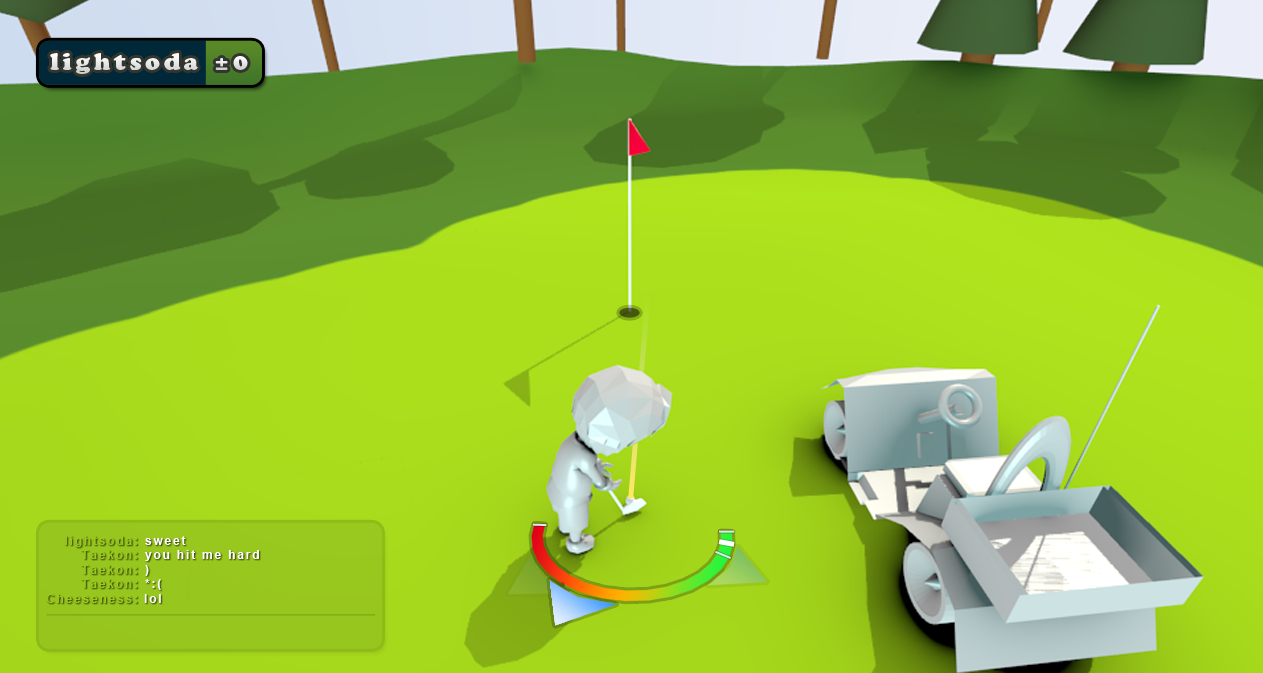
<style>
.page{position:relative;width:1263px;height:673px}
.page>*{position:absolute;margin:0}
.t1{font:24px "CooperBlackStd";letter-spacing:0.15em;color:#e6e7e6}
.t2{font:24px "CooperBlackStd";letter-spacing:0.15em;color:#e9eae9}
.t3{font:12px "Arial-BoldMT";letter-spacing:0.15em;color:#ffffff}
</style>
<div class="page">
<p class="t1" style="left:50px;top:53px;width:148px;height:21px">lightsoda</p>
<p class="t2" style="left:215px;top:56px;width:33px;height:14px">±0</p>
<p class="t3" style="left:145px;top:536px;width:41px;height:9px">sweet</p>
<p class="t3" style="left:145px;top:550px;width:114px;height:11px">you hit me hard</p>
<p class="t3" style="left:145px;top:565px;width:4px;height:11px">)</p>
<p class="t3" style="left:145px;top:579px;width:16px;height:11px">*:(</p>
<p class="t3" style="left:144px;top:594px;width:17px;height:9px">lol</p>
</div>
